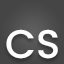
<style>
.page{position:relative;width:64px;height:64px;background:#454545}
.page>*{position:absolute;margin:0}
.t1{font:40px "Poppins-Medium";color:#ffffff}
</style>
<div class="page">
<p class="t1" style="left:6px;top:29px;width:52px;height:30px">CS</p>
</div>
